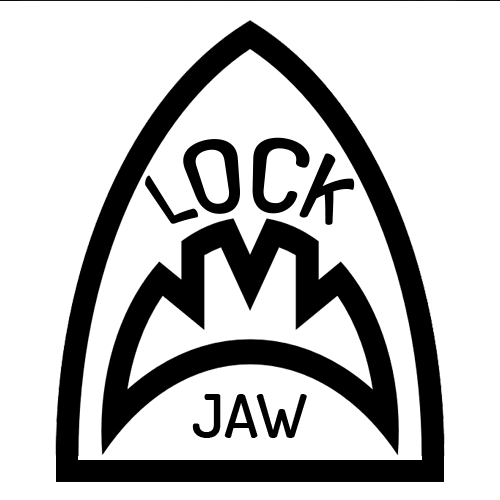
<style>
.page{position:relative;width:500px;height:500px;background:#ffffff}
.page>*{position:absolute;margin:0}
.t1{font:49.9px/32.5px "Dosis-SemiBold";color:#000000;scale:1.75 1}
.t2{font:61.5px "Dosis-SemiBold";color:#000000}
</style>
<div class="page">
<p class="t1" style="left:145px;top:136px;width:210px;height:88px">LOCK</p>
<p class="t2" style="left:192px;top:393px;width:115px;height:44px">JAW</p>
</div>
